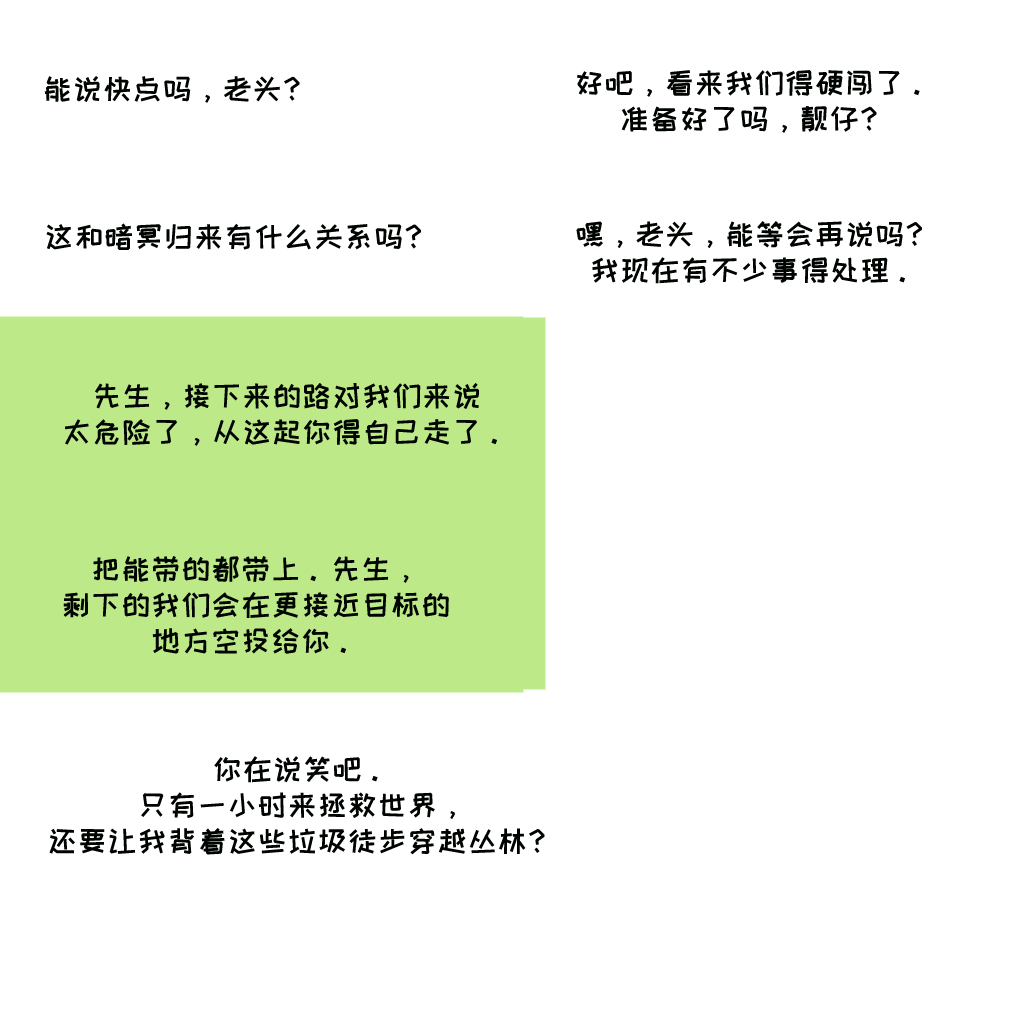
<style>
.page{position:relative;width:1024px;height:1024px;background:#ffffff}
.page>*{position:absolute;margin:0}
.t1{font:30px "HappyZcool-2016";color:#000400}
.t2{font:30px/36px "HappyZcool-2016";color:#000400}
</style>
<div class="page">
<p class="t1" style="left:44px;top:76px;width:256px;height:27px">能说快点吗，老头？</p>
<p class="t2" style="left:577px;top:70px;width:343px;height:63px;text-align:center">好吧，看来我们得硬闯了。<br>准备好了吗，靓仔？</p>
<p class="t2" style="left:576px;top:221px;width:346px;height:63px;text-align:center">嘿，老头，能等会再说吗？<br>我现在有不少事得处理。</p>
<p class="t1" style="left:46px;top:223px;width:375px;height:27px">这和暗冥归来有什么关系吗？</p>
<p class="t2" style="left:65px;top:383px;width:432px;height:63px;text-align:center">先生，接下来的路对我们来说<br>太危险了，从这起你得自己走了。</p>
<p class="t2" style="left:63px;top:556px;width:386px;height:98px;text-align:center">把能带的都带上。先生，<br>剩下的我们会在更接近目标的<br>地方空投给你。</p>
<p class="t2" style="left:49px;top:756px;width:496px;height:99px;text-align:center">你在说笑吧。<br>只有一小时来拯救世界，<br>还要让我背着这些垃圾徒步穿越丛林？</p>
</div>
